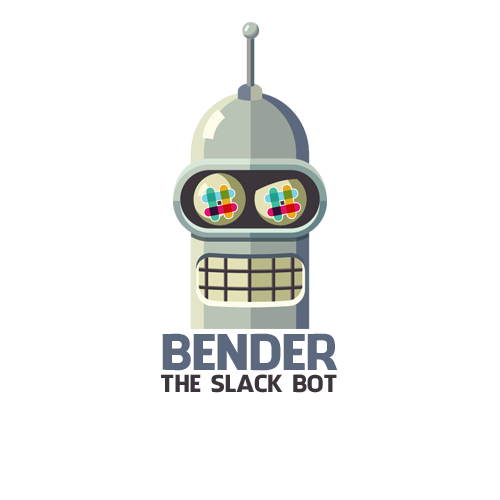
<style>
.page{position:relative;width:500px;height:500px;background:#ffffff}
.page>*{position:absolute;margin:0}
.t1{font:48px "FacebookLetterFaces";color:#5b687d;text-transform:uppercase}
.t2{font:23px "FacebookLetterFaces";color:#3c353b;text-transform:uppercase}
</style>
<div class="page">
<p class="t1" style="left:162px;top:333px;width:176px;height:38px">Bender</p>
<p class="t2" style="left:161px;top:374px;width:176px;height:19px">the slack bot</p>
</div>
